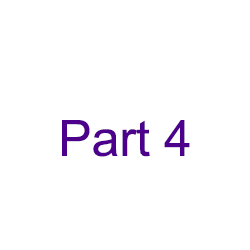
<style>
.page{position:relative;width:250px;height:250px;background:#ffffff}
.page>*{position:absolute;margin:0}
.t1{font:50px "ArialMT";color:#4d008c}
</style>
<div class="page">
<p class="t1" style="left:62px;top:120px;width:128px;height:37px">Part 4</p>
</div>
